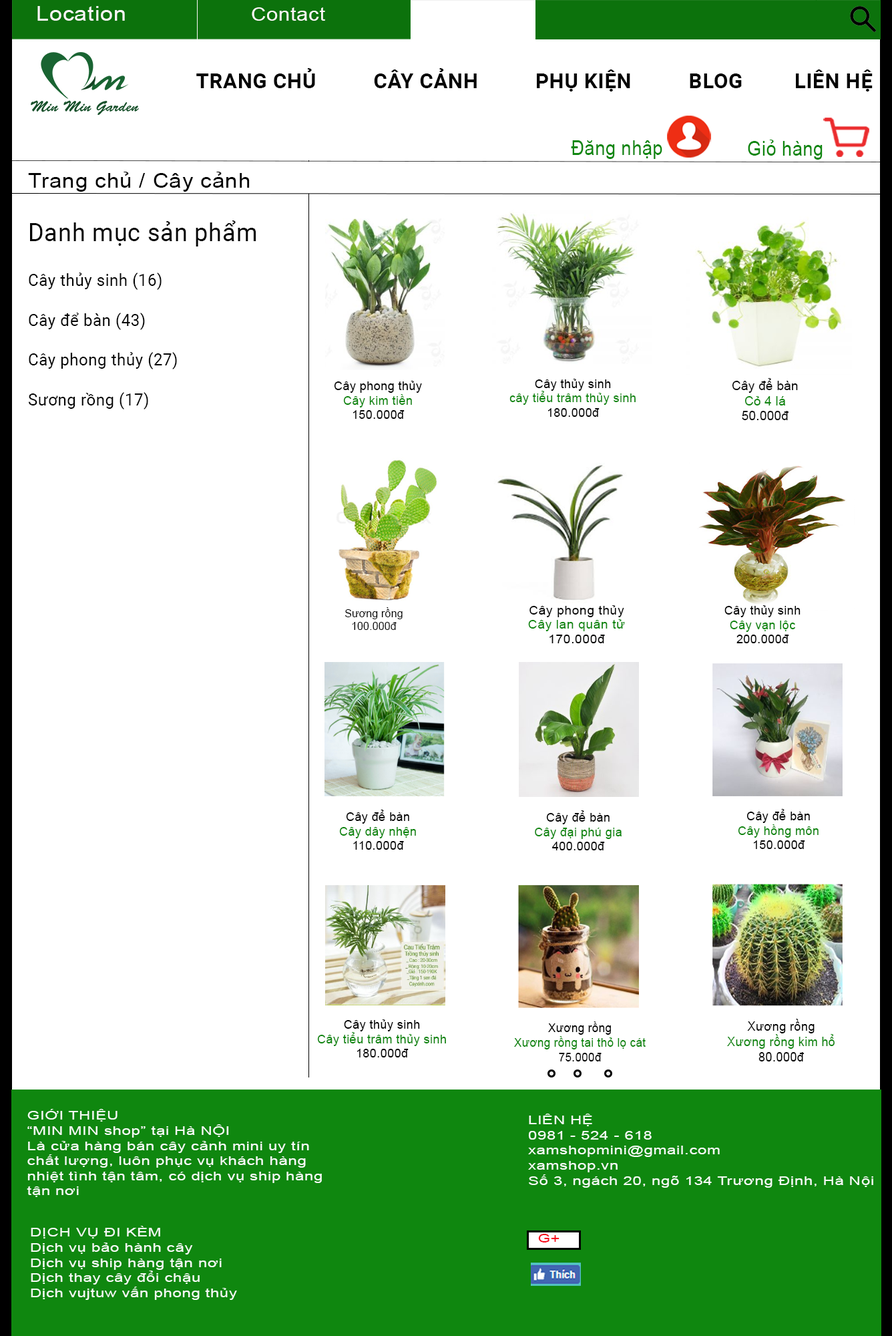
<style>
.page{position:relative;width:892px;height:1336px;background:#ffffff}
.page>*{position:absolute;margin:0}
.t1{font:20.6px "ArialMT";letter-spacing:0.025em;color:#fbf7f7;scale:1.11 1}
.t2{font:18.6px "ArialMT";letter-spacing:0.025em;color:#fbf7f7;scale:1.11 1}
.t3{font:20.8px "Roboto-Bold";letter-spacing:0.025em;color:#050505;text-transform:uppercase}
.t4{font:20.6px "ArialMT";letter-spacing:0.025em;color:#0f870f;scale:0.87 1}
.t5{font:20.9px "ArialMT";letter-spacing:0.025em;color:#040404;scale:1.07 1}
.t6{font:16.6px "Roboto-Regular";letter-spacing:0.025em;color:#040404;scale:0.97 1}
.t7{font:24.9px "Roboto-Regular";letter-spacing:0.025em;color:#040404;scale:0.97 1}
.t8{font:12px "ArialMT";letter-spacing:0.025em;color:#040404}
.t9{font:12px "ArialMT";letter-spacing:0.025em;color:#0f870f}
.t10{font:12.4px "ArialMT";letter-spacing:0.025em;color:#0a0a0a}
.t11{font:12.4px "ArialMT";letter-spacing:0.025em;color:#0f870f}
.t12{font:12px "ArialMT";letter-spacing:0.025em;color:#0f870f;scale:1.08 1}
.t13{font:12px "ArialMT";letter-spacing:0.025em;color:#040404;scale:1.08 1}
.t14{font:10.6px "ArialMT";letter-spacing:0.025em;color:#040404}
.t15{font:12.2px "ArialMT";letter-spacing:0.025em;color:#0f870f;scale:0.93 1}
.t16{font:12.2px "ArialMT";letter-spacing:0.025em;color:#040404;scale:0.93 1}
.t17{font:12.9px "ArialMT";letter-spacing:0.025em;color:#0f870f;scale:0.93 1}
.t18{font:12.9px "ArialMT";letter-spacing:0.025em;color:#040404;scale:0.93 1}
.t19{font:12.1px/15.1px "ArialMT";letter-spacing:0.025em;color:#f4fbf4;scale:1.33 1}
.t20{font:12.1px "ArialMT";letter-spacing:0.025em;color:#f60b1b;scale:1.33 1}
</style>
<div class="page">
<p class="t1" style="left:37px;top:6px;width:88px;height:15px">Location</p>
<p class="t2" style="left:252px;top:7px;width:73px;height:14px">Contact</p>
<p class="t3" style="left:196px;top:68px;width:677px;height:24px">Trang chủ          Cây cảnh          Phụ kiện          Blog         Liên hệ</p>
<p class="t4" style="left:571px;top:140px;width:92px;height:19px">Đăng nhập</p>
<p class="t4" style="left:748px;top:140px;width:75px;height:20px">Giỏ hàng</p>
<p class="t5" style="left:28px;top:172px;width:222px;height:20px">Trang chủ / Cây cảnh</p>
<p class="t6" style="left:28px;top:220px;width:229px;height:190px"><span class="t7">Danh mục sản phẩm<br><br></span>Cây thủy sinh (16)<br><br>Cây để bàn (43)<br><br>Cây phong thủy (27)<br><br>Sương rồng (17)</p>
<p class="t8" style="left:334px;top:381px;width:88px;height:38px;text-align:center">Cây phong thủy<br><span class="t9">Cây kim tiền<br></span>150.000đ</p>
<p class="t9" style="left:510px;top:379px;width:126px;height:38px;text-align:center"><span class="t8">Cây thủy sinh<br></span>cây tiểu trâm thủy sinh<br><span class="t8">180.000đ</span></p>
<p class="t10" style="left:732px;top:378px;width:66px;height:42px;text-align:center">Cây để bàn<br><span class="t11">Cỏ 4 lá<br></span>50.000đ</p>
<p class="t12" style="left:528px;top:605px;width:97px;height:38px;text-align:center"><span class="t13">Cây phong thủy<br></span>Cây lan quân tử<br><span class="t13">170.000đ</span></p>
<p class="t8" style="left:725px;top:605px;width:76px;height:38px;text-align:center">Cây thủy sinh<br><span class="t9">Cây vạn lộc<br></span>200.000đ</p>
<p class="t14" style="left:345px;top:607px;width:58px;height:23px;text-align:center">Sương rồng<br>100.000đ</p>
<p class="t9" style="left:339px;top:810px;width:77px;height:40px;text-align:center"><span class="t8">Cây để bàn<br></span>Cây dây nhện<br><span class="t8">110.000đ</span></p>
<p class="t9" style="left:738px;top:809px;width:81px;height:40px;text-align:center"><span class="t8">Cây để bàn<br></span>Cây hồng môn<br><span class="t8">150.000đ</span></p>
<p class="t9" style="left:535px;top:810px;width:87px;height:40px;text-align:center"><span class="t8">Cây để bàn<br></span>Cây đại phú gia<br><span class="t8">400.000đ</span></p>
<p class="t9" style="left:317px;top:1019px;width:129px;height:38px;text-align:center"><span class="t8">Cây thủy sinh<br></span>Cây tiểu trâm thủy sinh<br><span class="t8">180.000đ</span></p>
<p class="t15" style="left:514px;top:1021px;width:132px;height:41px;text-align:center"><span class="t16">Xương rồng<br></span>Xương rồng tai thỏ lọ cát<br><span class="t16">75.000đ</span></p>
<p class="t17" style="left:727px;top:1019px;width:108px;height:43px;text-align:center"><span class="t18">Xương rồng<br></span>Xương rồng kim hổ<br><span class="t18">80.000đ</span></p>
<p class="t19" style="left:27px;top:1109px;width:295px;height:88px">GIỚI THIỆU<br>“MIN MIN shop” tại Hà NỘI<br>Là cửa hàng bán cây cảnh mini uy tín<br>chất lượng, luôn phục vụ khách hàng <br>nhiệt tình tận tâm, có dịch vụ ship hàng <br>tận nơi</p>
<p class="t19" style="left:528px;top:1114px;width:346px;height:74px">LIÊN HỆ<br>0981 - 524 - 618<br>xamshopmini@gmail.com<br>xamshop.vn<br>Số 3, ngách 20, ngõ 134 Trương Định, Hà Nội</p>
<p class="t19" style="left:31px;top:1226px;width:206px;height:74px">DỊCH VỤ ĐI KÈM<br>Dịch vụ bảo hành cây<br>Dịch vụ ship hàng tận nơi<br>Dịch thay cây đổi chậu<br>Dịch vujtuw vấn phong thủy</p>
<p class="t20" style="left:538px;top:1234px;width:22px;height:9px">G+</p>
</div>
